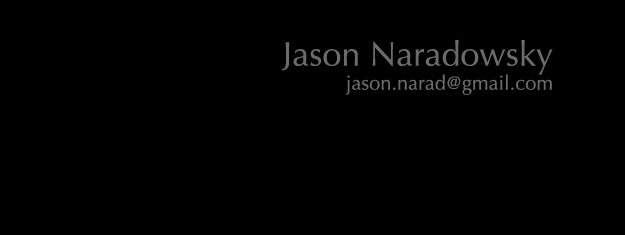
<style>
.page{position:relative;width:625px;height:235px;background:#000000}
.page>*{position:absolute;margin:0}
.t1{font:20px "Optima-Regular";color:#6b6b6b}
.t2{font:34px "Optima-Regular";color:#6b6b6b}
</style>
<div class="page">
<p class="t1" style="left:281px;top:39px;width:272px;height:56px;text-align:right"><span class="t2">Jason Naradowsky<br></span>jason.narad@gmail.com</p>
</div>
